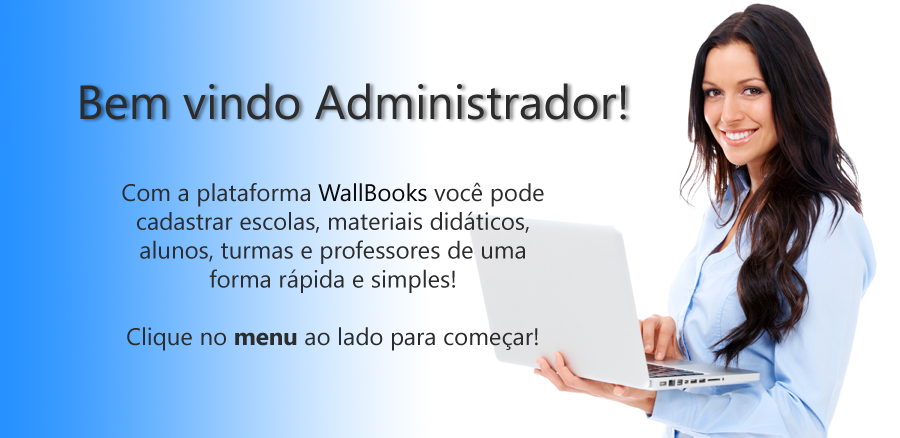
<style>
.page{position:relative;width:900px;height:438px;background:#ffffff}
.page>*{position:absolute;margin:0}
.t1{font:48px "KhmerUI";color:#2c2c2c}
.t2{font:24px "KhmerUI";color:#2c2c2c}
.t3{font:24px "KhmerUI";color:#0b0b0b}
.t4{font:24px "KhmerUI-Bold";color:#2c2c2c}
</style>
<div class="page">
<p class="t1" style="left:80px;top:83px;width:546px;height:37px">Bem vindo Administrador!</p>
<p class="t2" style="left:122px;top:182px;width:422px;height:169px;text-align:center">Com a plataforma <span class="t3">WallBooks</span> você pode<br>cadastrar escolas, materiais didáticos,<br>alunos, turmas e professores de uma<br>forma rápida e simples!<br><br>Clique no <span class="t4">menu</span> ao lado para começar!</p>
</div>
